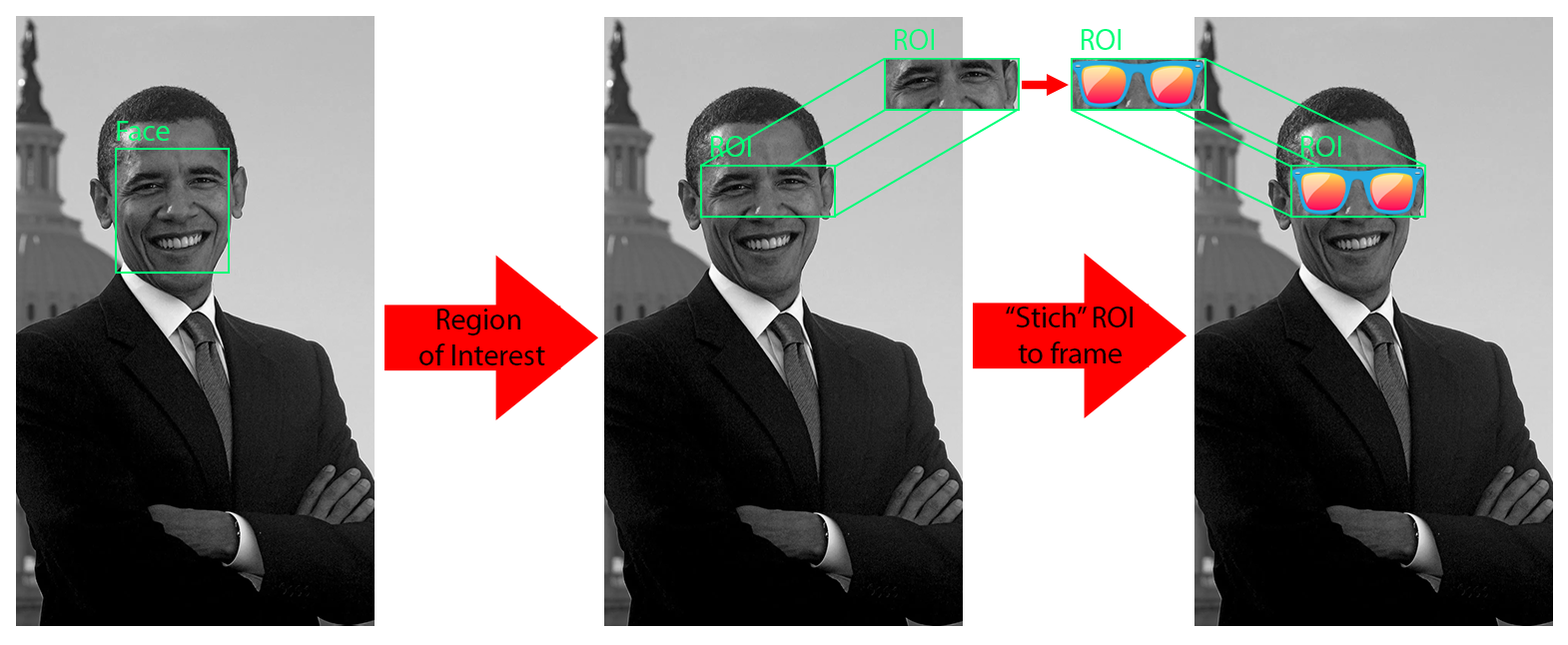
<style>
.page{position:relative;width:1568px;height:645px;background:#ffffff}
.page>*{position:absolute;margin:0}
.t1{font:30px "MyriadPro-Regular";color:#00ff78}
.t2{font:29.9px "MyriadPro-Regular";color:#00ff78}
.t3{font:29.9px "MyriadPro-Regular";color:#000000}
</style>
<div class="page">
<p class="t1" style="left:895px;top:29px;width:39px;height:21px">ROI</p>
<p class="t1" style="left:1082px;top:29px;width:39px;height:21px">ROI</p>
<p class="t2" style="left:711px;top:136px;width:40px;height:21px">ROI</p>
<p class="t2" style="left:1301px;top:136px;width:40px;height:21px">ROI</p>
<p class="t3" style="left:1006px;top:306px;width:127px;height:58px;text-align:center">“Stich” ROI<br>to frame</p>
<p class="t3" style="left:419px;top:309px;width:126px;height:57px;text-align:center">Region <br>of Interest</p>
</div>
